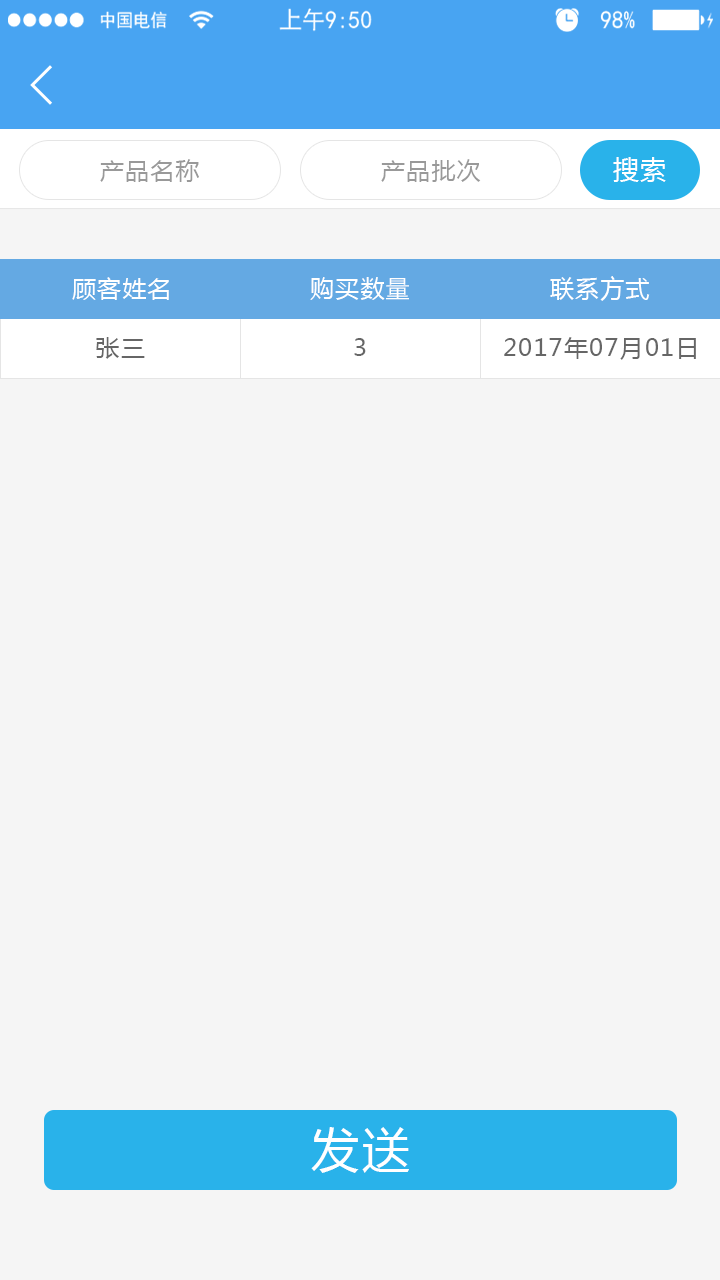
<style>
.page{position:relative;width:720px;height:1280px;background:#f5f5f5}
.page>*{position:absolute;margin:0}
.t1{font:24px "MicrosoftYaHei";letter-spacing:0.05em;color:#999999}
.t2{font:26px "MicrosoftYaHei";letter-spacing:0.05em;color:#ffffff}
.t3{font:24px "MicrosoftYaHei";letter-spacing:0.05em;color:#ffffff}
.t4{font:24px "MicrosoftYaHei";letter-spacing:0.05em;color:#666666}
.t5{font:48px "MicrosoftYaHei";letter-spacing:0.05em;color:#ffffff}
</style>
<div class="page">
<p class="t1" style="left:100px;top:159px;width:99px;height:23px">产品名称</p>
<p class="t1" style="left:381px;top:159px;width:100px;height:23px">产品批次</p>
<p class="t2" style="left:613px;top:157px;width:53px;height:25px">搜索</p>
<p class="t3" style="left:72px;top:277px;width:97px;height:23px">顾客姓名</p>
<p class="t3" style="left:310px;top:277px;width:99px;height:23px">购买数量</p>
<p class="t3" style="left:550px;top:276px;width:100px;height:25px">联系方式</p>
<p class="t4" style="left:96px;top:337px;width:49px;height:22px">张三</p>
<p class="t4" style="left:354px;top:338px;width:12px;height:18px">3</p>
<p class="t4" style="left:504px;top:337px;width:192px;height:23px">2017年07月01日</p>
<p class="t5" style="left:311px;top:1127px;width:98px;height:46px">发送</p>
</div>
